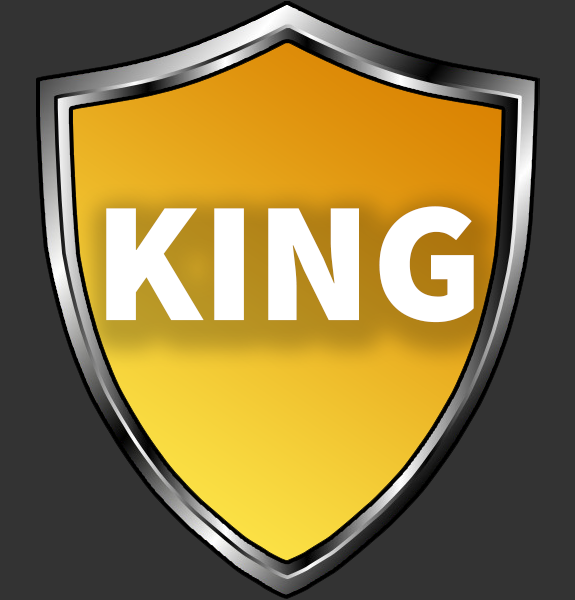
<style>
.page{position:relative;width:575px;height:600px;background:#333333}
.page>*{position:absolute;margin:0}
.t1{font:171.6px "AssistantRoman-ExtraBold";color:#ffffff;font-weight:bold}
</style>
<div class="page">
<p class="t1" style="left:106px;top:206px;width:368px;height:117px">KING</p>
</div>
